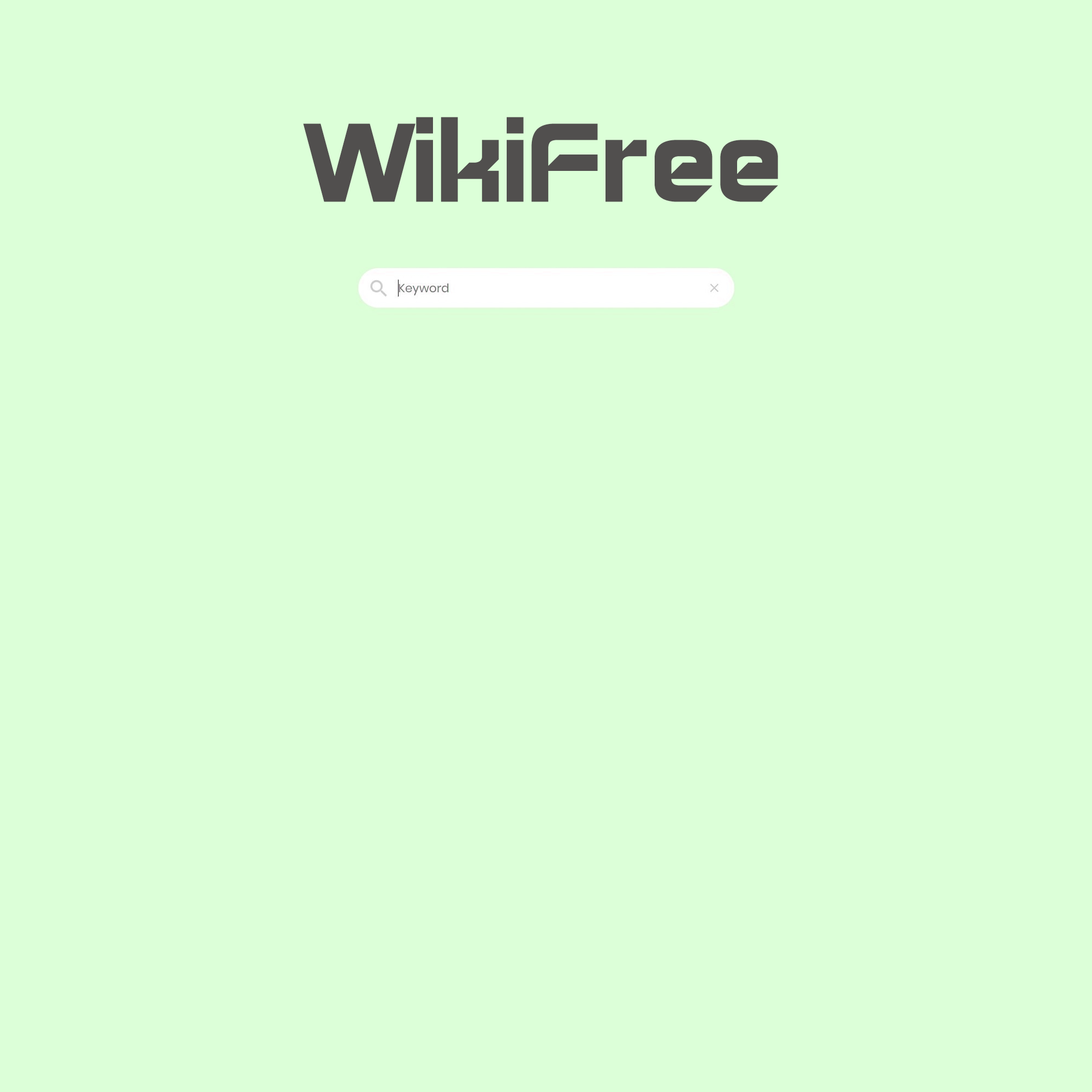
<style>
.page{position:relative;width:1092px;height:1092px;background:#dcffd8}
.page>*{position:absolute;margin:0}
.t1{font:129.9px "GayatriRegular";color:#514f4e}
</style>
<div class="page">
<p class="t1" style="left:303px;top:117px;width:475px;height:85px">WikiFree</p>
</div>
